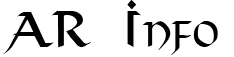
<style>
.page{position:relative;width:234px;height:57px;background:#ffffff}
.page>*{position:absolute;margin:0}
.t1{font:48px "Viking-Medium";color:#000000;font-variant:small-caps;scale:0.9 1}
</style>
<div class="page">
<p class="t1" style="left:3px;top:0px;width:215px;height:55px">AR Info</p>
</div>
